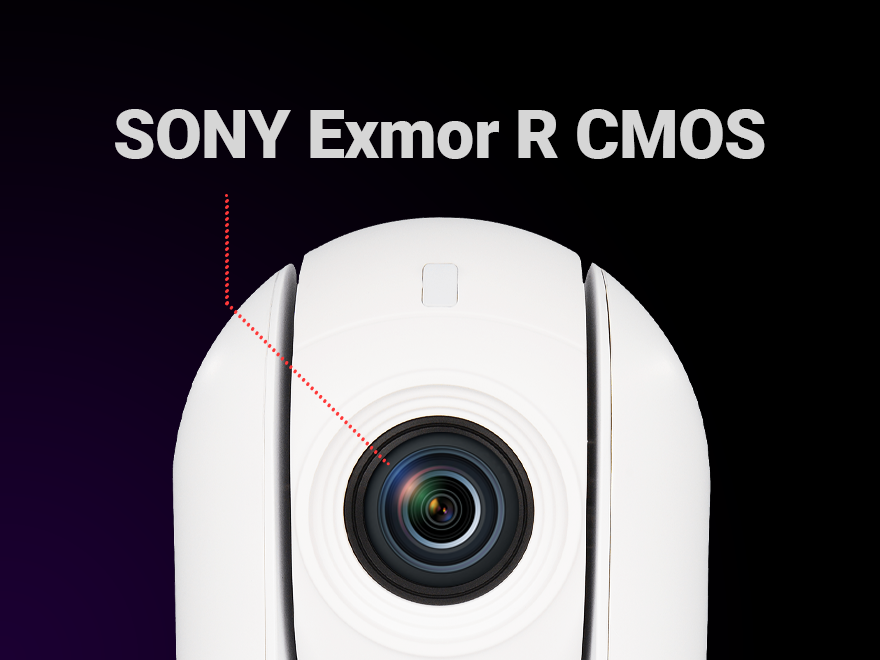
<style>
.page{position:relative;width:880px;height:660px;background:#000000}
.page>*{position:absolute;margin:0}
.t1{font:68px "Roboto-Black";letter-spacing:-0.01em;color:#d6d6d6}
</style>
<div class="page">
<p class="t1" style="left:115px;top:109px;width:650px;height:50px">SONY Exmor R CMOS</p>
</div>
